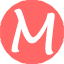
<style>
.page{position:relative;width:64px;height:64px;background:#ff6767}
.page>*{position:absolute;margin:0}
.t1{font:51.2px "LucidaHandwriting-Italic";color:#ffffff;font-weight:bold}
</style>
<div class="page">
<p class="t1" style="left:11px;top:8px;width:44px;height:47px">M</p>
</div>
